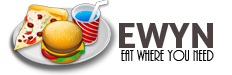
<style>
.page{position:relative;width:232px;height:75px;background:#ffffff}
.page>*{position:absolute;margin:0}
.t1{font:36px "Amaranth-Bold";color:#4c4141}
.t2{font:16px "ARBONNIE";color:#000000}
</style>
<div class="page">
<p class="t1" style="left:119px;top:23px;width:94px;height:25px">EWYN</p>
<p class="t2" style="left:121px;top:50px;width:93px;height:11px">EAT WHERE YOU NEED</p>
</div>
